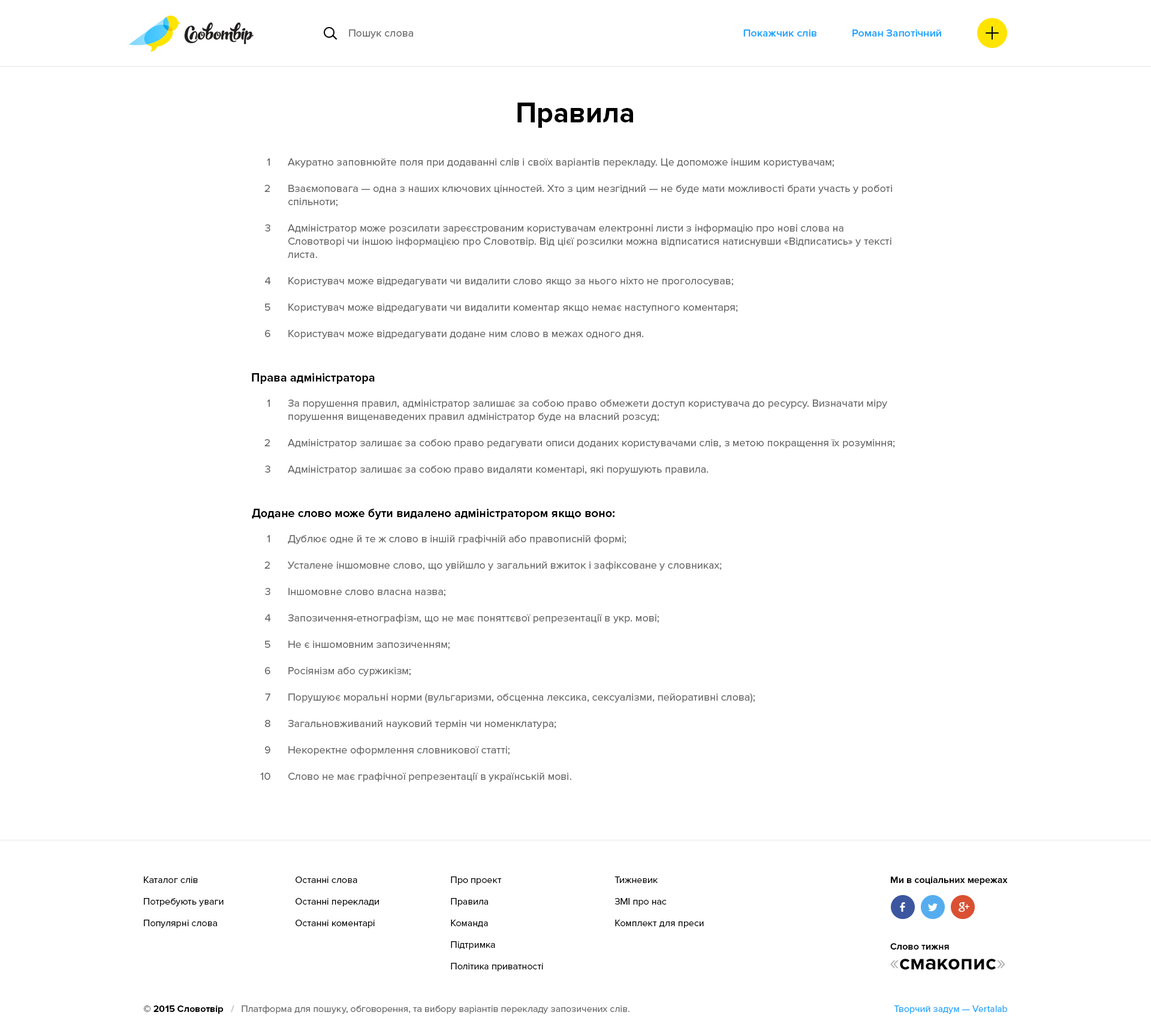
<style>
.page{position:relative;width:1151px;height:1036px;background:#ffffff}
.page>*{position:absolute;margin:0}
.t1{font:10.8px "ProximaNova-Regular";color:#666666}
.t2{font:10.8px "ProximaNova-Semibold";color:#17a2ff}
.t3{font:28.8px "ProximaNova-Bold";color:#000000}
.t4{font:10.8px/13.2px "ProximaNova-Regular";color:#666666}
.t5{font:12px "ProximaNova-Bold";color:#000000}
.t6{font:9.6px/21.6px "ProximaNova-Regular";color:#000000}
.t7{font:9.6px/21.6px "ProximaNova-Regular";color:#010101}
.t8{font:9.6px "ProximaNova-Bold";color:#010101}
.t9{font:21.6px "ProximaNova-Bold";color:#000000}
.t10{font:21.6px "ProximaNova-Regular";color:#b3b3b3}
.t11{font:9.6px "ProximaNova-Regular";color:#666666}
.t12{font:9.6px "ProximaNova-Bold";color:#000000}
.t13{font:9.6px "ProximaNova-Bold";color:#bfbfbf}
.t14{font:9.6px "ProximaNova-Regular";color:#17a2ff}
</style>
<div class="page">
<p class="t1" style="left:349px;top:29px;width:64px;height:9px">Пошук слова</p>
<p class="t2" style="left:744px;top:29px;width:73px;height:8px">Покажчик слів</p>
<p class="t2" style="left:853px;top:29px;width:88px;height:8px">Роман Запотічний</p>
<p class="t3" style="left:518px;top:103px;width:115px;height:25px">Правила</p>
<p class="t1" style="left:267px;top:158px;width:3px;height:8px">1</p>
<p class="t4" style="left:288px;top:158px;width:605px;height:181px">Акуратно заповнюйте поля при додаванні слів і своїх варіантів перекладу. Це допоможе іншим користувачам;<br><br>Взаємоповага — одна з наших ключових цінностей. Хто з цим незгідний — не буде мати можливості брати участь у роботі спільноти;<br><br>Адміністратор може розсилати зареєстрованим користувачам електронні листи з інформацію про нові слова на Словотворі чи іншою інформацією про Словотвір. Від цієї розсилки можна відписатися натиснувши «Відписатись» у тексті листа.<br><br>Користувач може відредагувати чи видалити слово якщо за нього ніхто не проголосував;<br><br>Користувач може відредагувати чи видалити коментар якщо немає наступного коментаря;<br><br>Користувач може відредагувати додане ним слово в межах одного дня.</p>
<p class="t4" style="left:264px;top:185px;width:7px;height:152px;text-align:right">2<br><br><br>3<br><br><br><br>4<br><br>5<br><br>6</p>
<p class="t5" style="left:252px;top:373px;width:123px;height:11px">Права адміністратора</p>
<p class="t1" style="left:267px;top:399px;width:3px;height:8px">1</p>
<p class="t4" style="left:288px;top:399px;width:607px;height:75px">За порушення правил, адміністратор залишає за собою право обмежети доступ користувача до ресурсу. Визначати міру порушення вищенаведених правил адміністратор буде на власний розсуд;<br><br>Адміністратор залишає за собою право редагувати описи доданих користувачами слів, з метою покращення їх розуміння;<br><br>Адміністратор залишає за собою право видаляти коментарі, які порушують правила.</p>
<p class="t1" style="left:264px;top:439px;width:6px;height:7px">2</p>
<p class="t1" style="left:265px;top:465px;width:5px;height:8px">3</p>
<p class="t5" style="left:252px;top:509px;width:363px;height:10px">Додане слово може бути видалено адміністратором якщо воно:</p>
<p class="t4" style="left:260px;top:535px;width:11px;height:245px;text-align:right">1<br><br>2<br><br>3<br><br>4<br><br>5<br><br>6<br><br>7<br><br>8<br><br>9<br><br>10</p>
<p class="t4" style="left:288px;top:534px;width:467px;height:247px">Дублює одне й те ж слово в іншій графічній або правописній формі;<br><br>Усталене іншомовне слово, що увійшло у загальний вжиток і зафіксоване у словниках;<br><br>Іншомовне слово власна назва;<br><br>Запозичення-етнографізм, що не має поняттєвої репрезентації в укр. мові;<br><br>Не є іншомовним запозиченням;<br><br>Росіянізм або суржикізм;<br><br>Порушуює моральні норми (вульгаризми, обсценна лексика, сексуалізми, пейоративні слова);<br><br>Загальновживаний науковий термін чи номенклатура;<br><br>Некоректне оформлення словникової статті;<br><br>Слово не має графічної репрезентації в українській мові.</p>
<p class="t6" style="left:144px;top:876px;width:80px;height:52px">Каталог слів<br>Потребують уваги<br>Популярні слова</p>
<p class="t6" style="left:296px;top:876px;width:83px;height:52px">Останні слова<br>Останні переклади<br>Останні коментарі</p>
<p class="t6" style="left:451px;top:876px;width:92px;height:95px">Про проект<br>Правила<br>Команда<br>Підтримка<br>Політика приватності</p>
<p class="t7" style="left:615px;top:876px;width:89px;height:52px">Тижневик<br>ЗМІ про нас<br>Комплект для преси</p>
<p class="t8" style="left:891px;top:876px;width:117px;height:9px">Ми в соціальних мережах</p>
<p class="t8" style="left:891px;top:943px;width:58px;height:6px">Слово тижня</p>
<p class="t9" style="left:891px;top:958px;width:115px;height:12px"><span class="t10">«</span>смакопис<span class="t10">»</span></p>
<p class="t11" style="left:144px;top:1005px;width:486px;height:8px"><span class="t12">© 2015 Словотвір   </span><span class="t13">/   </span>Платформа для пошуку, обговорення, та вибору варіантів перекладу запозичених слів.</p>
<p class="t14" style="left:894px;top:1005px;width:113px;height:8px">Творчий задум — Vertalab</p>
</div>
